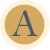
<style>
.page{position:relative;width:50px;height:50px;background:#d6a963}
.page>*{position:absolute;margin:0}
.t1{font:36px "YuMin_36pKn-Medium";color:#4a5a6a}
</style>
<div class="page">
<p class="t1" style="left:11px;top:10px;width:27px;height:26px">A</p>
</div>
